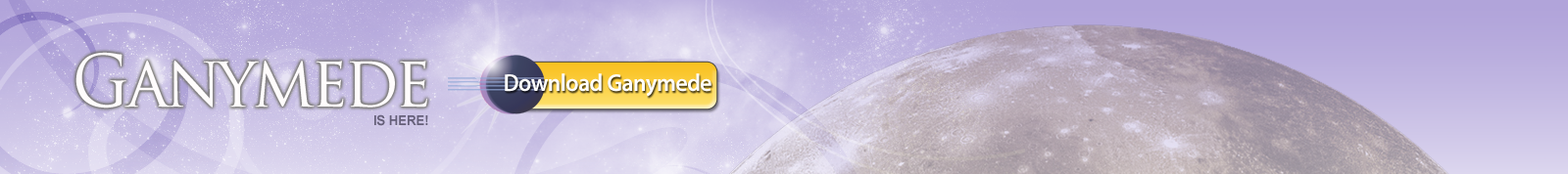
<style>
.page{position:relative;width:1568px;height:174px}
.page>*{position:absolute;margin:0}
.t1{font:70.6px "TrajanPro-Regular";letter-spacing:-0.05em;color:#fffcfc;scale:0.95 1}
.t2{font:24.5px "MyriadPro-Semibold";letter-spacing:-0.025em;color:#ffffff;scale:0.95 1}
.t3{font:13.7px "Arial-BoldMT";letter-spacing:-0.01em;color:#655f79;scale:0.95 1}
</style>
<div class="page">
<p class="t1" style="left:75px;top:52px;width:352px;height:57px">Ganymede</p>
<p class="t2" style="left:505px;top:74px;width:206px;height:23px">Download Ganymede</p>
<p class="t3" style="left:374px;top:115px;width:54px;height:11px">IS HERE!</p>
</div>
